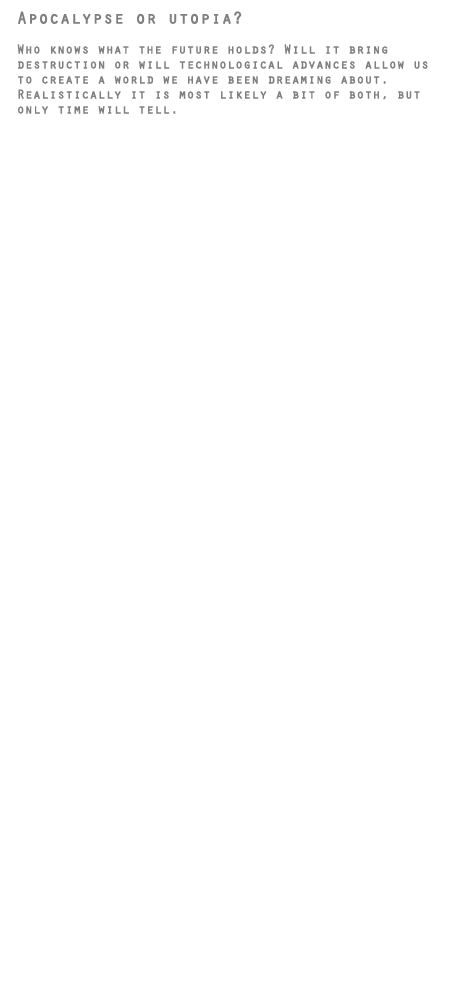
<style>
.page{position:relative;width:450px;height:1000px;background:#ffffff}
.page>*{position:absolute;margin:0}
.t1{font:12.5px "Orator-Regular";color:#7f7f7f;font-weight:bold}
.t2{font:16.7px "Orator-Regular";color:#7f7f7f;font-weight:bold}
</style>
<div class="page">
<p class="t1" style="left:17px;top:11px;width:411px;height:103px;text-align:right"><span class="t2">Apocalypse or utopia? <br></span><br>Who knows what the future holds? Will it bring<br>destruction or will technological advances allow us<br>to create a world we have been dreaming about.<br>Realistically it is most likely a bit of both, but <br>only time will tell.</p>
</div>
